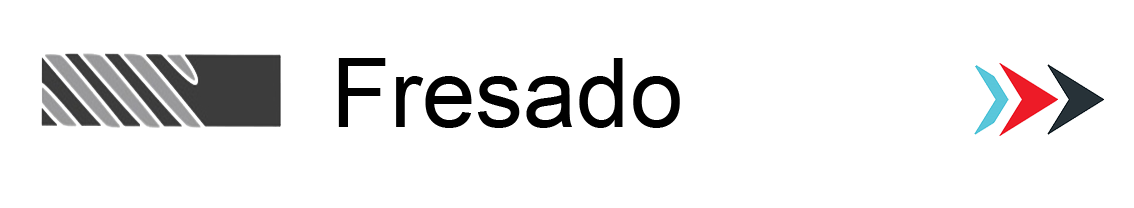
<style>
.page{position:relative;width:1134px;height:208px;background:#ffffff}
.page>*{position:absolute;margin:0}
.t1{font:96px "ArialMT";color:#000000}
</style>
<div class="page">
<p class="t1" style="left:338px;top:58px;width:342px;height:70px">Fresado</p>
</div>
